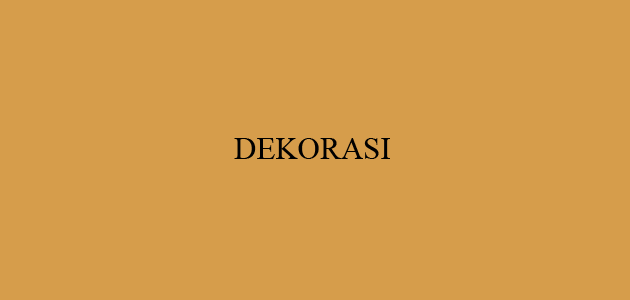
<style>
.page{position:relative;width:630px;height:300px;background:#d69d4b}
.page>*{position:absolute;margin:0}
.t1{font:31px "TimesNewRomanPSMT";color:#000000}
</style>
<div class="page">
<p class="t1" style="left:234px;top:138px;width:156px;height:21px">DEKORASI</p>
</div>
